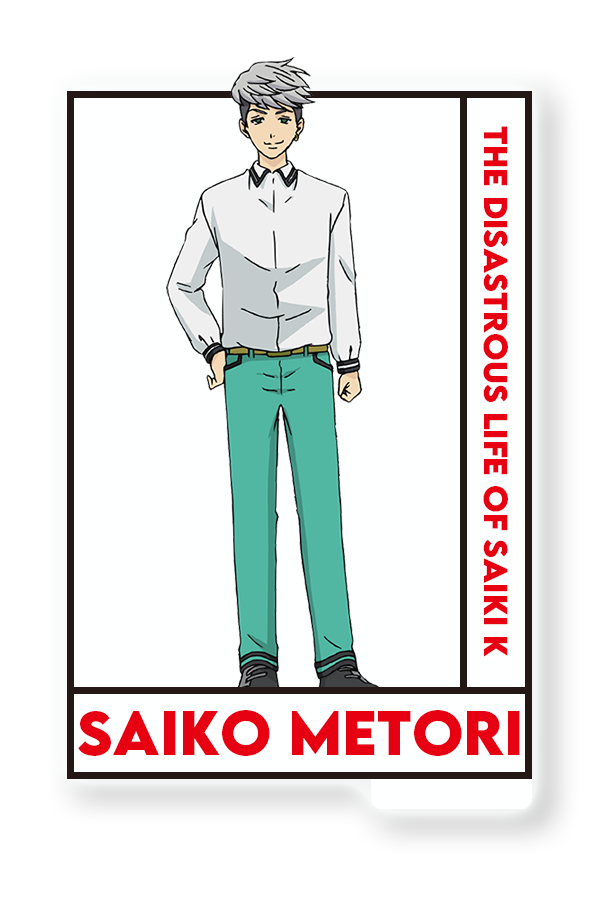
<style>
.page{position:relative;width:600px;height:900px;background:#feffff}
.page>*{position:absolute;margin:0}
.t1{font:29.6px "LEMONMILK-Bold";color:#e70012}
.t2{font:55.4px "LEMONMILK-Bold";color:#e70012}
</style>
<div class="page">
<p class="t1" style="left:483px;top:126px;width:25px;height:531px;rotate:90deg">THE disastrous Life of saiki K</p>
<p class="t2" style="left:78px;top:710px;width:442px;height:46px">Saiko Metori</p>
</div>
